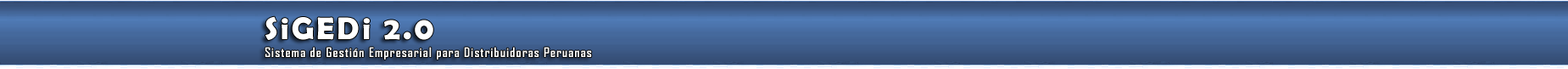
<style>
.page{position:relative;width:1568px;height:69px}
.page>*{position:absolute;margin:0}
.t1{font:31.7px "BerlinSansFBDemi-Bold";letter-spacing:0.08em;color:#ffffff}
.t2{font:12.7px "AgencyFB-Bold";letter-spacing:0.08em;color:#ffffff}
</style>
<div class="page">
<p class="t1" style="left:265px;top:16px;width:168px;height:24px">SiGEDi 2.0</p>
<p class="t2" style="left:265px;top:47px;width:327px;height:12px">Sistema de Gestión Empresarial para Distribuidoras Peruanas</p>
</div>
